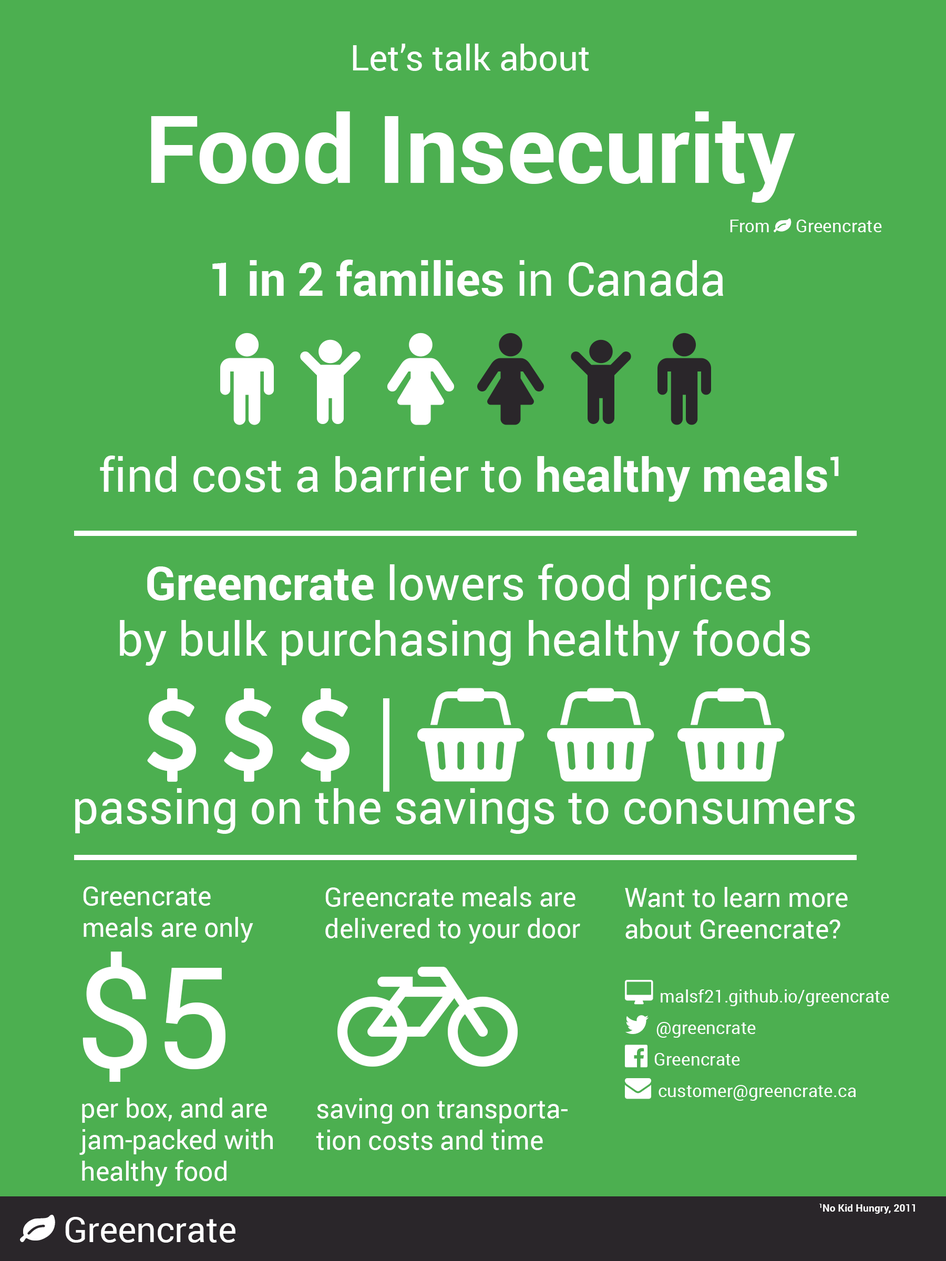
<style>
.page{position:relative;width:946px;height:1261px;background:#4caf50}
.page>*{position:absolute;margin:0}
.t1{font:35px "Roboto-Regular";color:#ffffff}
.t2{font:93.4px "Roboto-Bold";color:#ffffff}
.t3{font:46.7px "Roboto-Bold";color:#ffffff}
.t4{font:46.7px "Roboto-Regular";color:#ffffff}
.t5{font:26.3px "Roboto-Regular";color:#ffffff}
.t6{font:140.1px "Roboto-Regular";color:#ffffff}
.t7{font:10.2px "Roboto-Bold";color:#ffffff}
</style>
<div class="page">
<p class="t1" style="left:151px;top:44px;width:644px;height:159px;text-align:center">Let’s talk about<br><span class="t2">Food Insecurity</span></p>
<p class="t3" style="left:212px;top:260px;width:511px;height:36px">1 in 2 families<span class="t4"> in Canada</span></p>
<p class="t4" style="left:100px;top:456px;width:739px;height:46px">find cost a barrier to<span class="t3"> healthy meals1</span></p>
<p class="t5" style="left:83px;top:886px;width:170px;height:57px">Greencrate meals are only</p>
<p class="t5" style="left:325px;top:886px;width:255px;height:58px">Greencrate meals are delivered to your door</p>
<p class="t5" style="left:625px;top:887px;width:222px;height:52px">Want to learn more about Greencrate?</p>
<p class="t6" style="left:82px;top:951px;width:143px;height:131px">$5</p>
<p class="t5" style="left:79px;top:1098px;width:194px;height:88px">per box, and are jam-packed with healthy food</p>
<p class="t5" style="left:316px;top:1098px;width:251px;height:52px">saving on transportation costs and time</p>
<p class="t7" style="left:819px;top:1204px;width:96px;height:10px">1No Kid Hungry, 2011</p>
</div>
